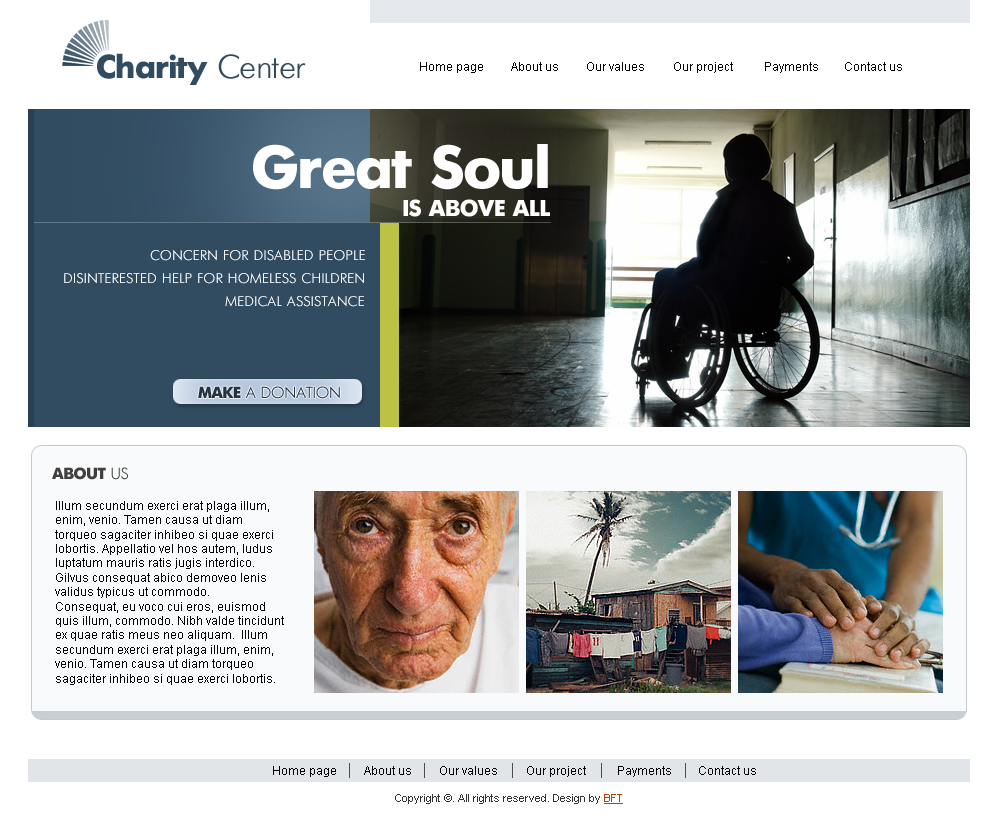
<style>
.page{position:relative;width:1000px;height:837px;background:#ffffff}
.page>*{position:absolute;margin:0}
.t1{font:33px "UkrainianFuturisBold";letter-spacing:-0.025em;color:#314c61}
.t2{font:33px "UkrainianFuturis";letter-spacing:-0.025em;color:#314c61}
.t3{font:12px "ArialMT";color:#010101}
.t4{font:60px "UkrainianFuturisBold";letter-spacing:-0.025em;color:#ffffff}
.t5{font:23px "UkrainianFuturisBold";letter-spacing:-0.025em;color:#ffffff;text-transform:uppercase}
.t6{font:14px "UkrainianFuturis";color:#ffffff;text-transform:uppercase}
.t7{font:16px "UkrainianFuturis";letter-spacing:-0.04em;color:#273340;text-transform:uppercase}
.t8{font:16px "UkrainianFuturisBold";letter-spacing:-0.04em;color:#273340;text-transform:uppercase}
.t9{font:16px "UkrainianFuturisBold";letter-spacing:-0.025em;color:#41403f;text-transform:uppercase}
.t10{font:16px "UkrainianFuturis";letter-spacing:-0.025em;color:#41403f;text-transform:uppercase}
.t11{font:11px "ArialMT";color:#323232}
.t12{font:11px "ArialMT";color:#b94304;text-decoration:underline}
</style>
<div class="page">
<p class="t1" style="left:97px;top:53px;width:209px;height:32px">Charity <span class="t2">Center</span></p>
<p class="t3" style="left:420px;top:62px;width:63px;height:11px">Home page</p>
<p class="t3" style="left:511px;top:62px;width:47px;height:9px">About us</p>
<p class="t3" style="left:587px;top:62px;width:57px;height:9px">Our values</p>
<p class="t3" style="left:674px;top:62px;width:59px;height:11px">Our project</p>
<p class="t3" style="left:765px;top:62px;width:53px;height:11px">Payments</p>
<p class="t3" style="left:845px;top:62px;width:57px;height:9px">Contact us</p>
<p class="t4" style="left:253px;top:144px;width:295px;height:46px">Great Soul</p>
<p class="t5" style="left:403px;top:199px;width:147px;height:18px">is above all</p>
<p class="t6" style="left:150px;top:249px;width:215px;height:12px">concern for disabled people</p>
<p class="t6" style="left:64px;top:272px;width:300px;height:12px">disinterested help for homeless children</p>
<p class="t6" style="left:225px;top:295px;width:139px;height:12px">medical assistance</p>
<p class="t7" style="left:198px;top:386px;width:142px;height:13px"><span class="t8">make </span>a donation</p>
<p class="t9" style="left:52px;top:467px;width:76px;height:13px">About<span class="t10"> us</span></p>
<p class="t3" style="left:55px;top:501px;width:229px;height:184px">Illum secundum exerci erat plaga illum, enim, venio. Tamen causa ut diam torqueo sagaciter inhibeo si quae exerci lobortis. Appellatio vel hos autem, ludus luptatum mauris ratis jugis interdico. Gilvus consequat abico demoveo lenis validus typicus ut commodo. <br>Consequat, eu voco cui eros, euismod quis illum, commodo. Nibh valde tincidunt ex quae ratis meus neo aliquam.  Illum secundum exerci erat plaga illum, enim, venio. Tamen causa ut diam torqueo sagaciter inhibeo si quae exerci lobortis. Appellatio vel hos autem, ludus luptatum mauris ratis jugis interdico.</p>
<p class="t3" style="left:273px;top:766px;width:63px;height:11px">Home page</p>
<p class="t3" style="left:364px;top:766px;width:47px;height:9px">About us</p>
<p class="t3" style="left:440px;top:766px;width:57px;height:9px">Our values</p>
<p class="t3" style="left:527px;top:766px;width:59px;height:11px">Our project</p>
<p class="t3" style="left:618px;top:766px;width:53px;height:11px">Payments</p>
<p class="t3" style="left:699px;top:766px;width:57px;height:9px">Contact us</p>
<p class="t11" style="left:395px;top:794px;width:228px;height:10px">Copyright ©. All rights reserved. Design by <span class="t12">BFT</span></p>
</div>
